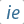
<style>
.page{position:relative;width:24px;height:24px;background:#ffffff}
.page>*{position:absolute;margin:0}
.t1{font:20px "MyriadPro-It";color:#356e95}
</style>
<div class="page">
<p class="t1" style="left:6px;top:5px;width:14px;height:14px">ie</p>
</div>
